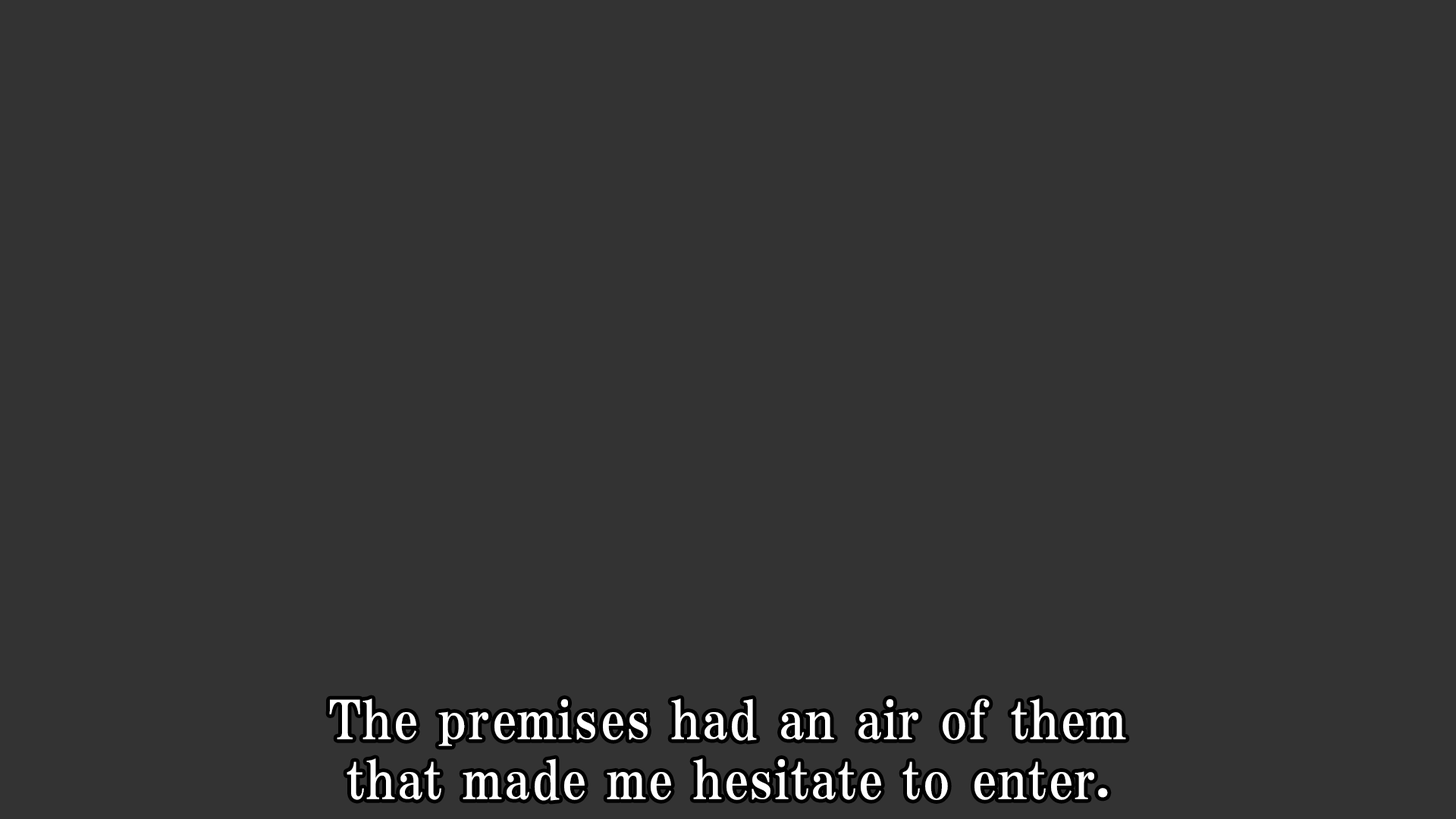
<style>
.page{position:relative;width:1456px;height:819px;background:#333333}
.page>*{position:absolute;margin:0}
.t1{font:53.1px/59.9px "HGPMinchoE";letter-spacing:0.025em;color:#ffffff}
</style>
<div class="page">
<p class="t1" style="left:329px;top:698px;width:797px;height:103px;text-align:center">The premises had an air of them<br>that made me hesitate to enter.</p>
</div>
